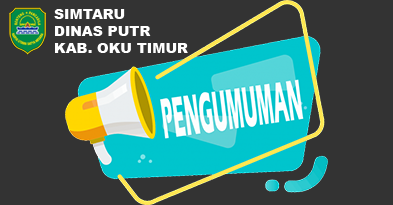
<style>
.page{position:relative;width:393px;height:205px;background:#333333}
.page>*{position:absolute;margin:0}
.t1{font:14px "Arial-Black";color:#ffffff}
</style>
<div class="page">
<p class="t1" style="left:54px;top:9px;width:134px;height:44px">SIMTARU<br>DINAS PUTR<br>KAB. OKU TIMUR</p>
</div>
